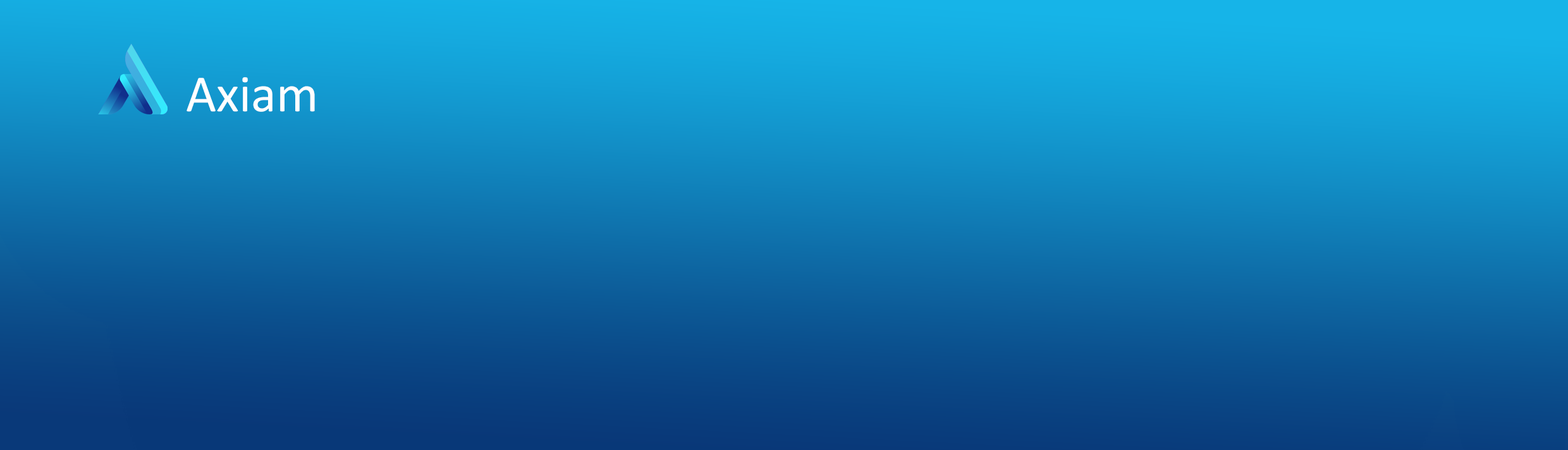
<style>
.page{position:relative;width:1568px;height:450px}
.page>*{position:absolute;margin:0}
.t1{font:52.7px "Calibri";color:#ffffff}
</style>
<div class="page">
<p class="t1" style="left:187px;top:77px;width:128px;height:35px">Axiam</p>
</div>
